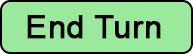
<style>
.page{position:relative;width:193px;height:54px;background:#9ae99d}
.page>*{position:absolute;margin:0}
.t1{font:32px "ArialMT";color:#000000;font-weight:bold}
</style>
<div class="page">
<p class="t1" style="left:27px;top:15px;width:134px;height:24px">End Turn</p>
</div>
